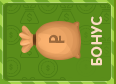
<style>
.page{position:relative;width:116px;height:84px;background:#5a8d1a}
.page>*{position:absolute;margin:0}
.t1{font:15px "RotondaC-Bold";letter-spacing:0.04em;color:#fadcc0;text-transform:uppercase}
</style>
<div class="page">
<p class="t1" style="left:91px;top:16px;width:11px;height:50px;rotate:-90deg">бонус</p>
</div>
